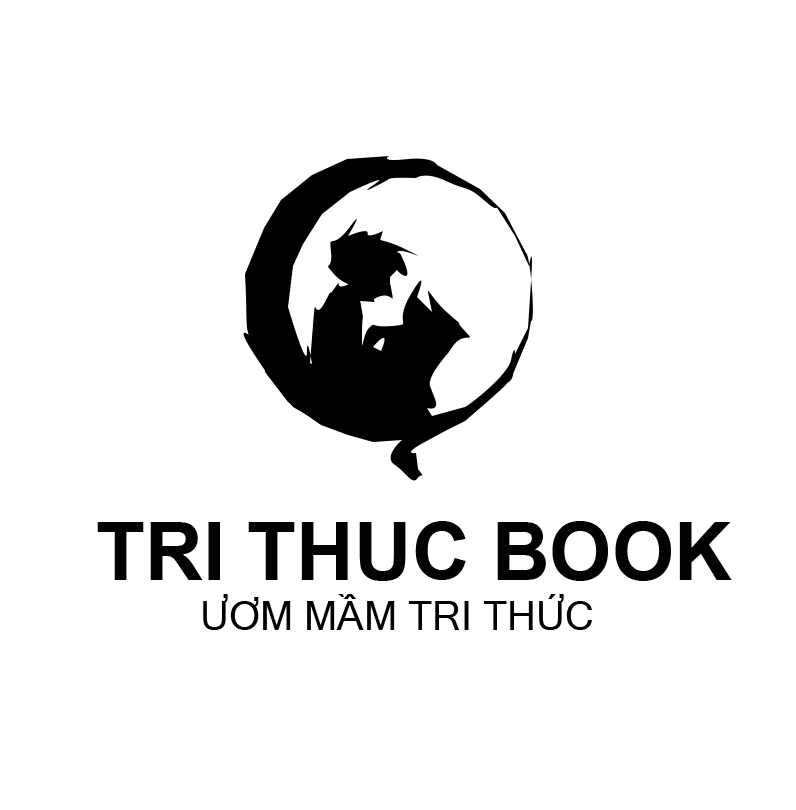
<style>
.page{position:relative;width:796px;height:810px;background:#ffffff}
.page>*{position:absolute;margin:0}
.t1{font:80px "Arial-BoldMT";color:#020202}
.t2{font:40px "MicrosoftSansSerif";color:#020202}
</style>
<div class="page">
<p class="t1" style="left:97px;top:521px;width:635px;height:60px">TRI THUC BOOK</p>
<p class="t2" style="left:203px;top:594px;width:389px;height:36px">ƯƠM MẦM TRI THỨC</p>
</div>
